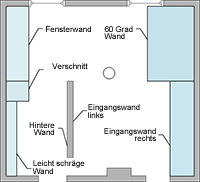
<style>
.page{position:relative;width:200px;height:182px;background:#ffffff}
.page>*{position:absolute;margin:0}
.t1{font:8px "ArialMT"}
.t2{font:8px/7.2px "ArialMT";color:#000000}
.t3{font:8px/7.2px "ArialMT"}
</style>
<div class="page">
<p class="t1" style="left:46px;top:26px;width:45px;height:6px">Fensterwand</p>
<p class="t2" style="left:104px;top:26px;width:29px;height:13px">60 Grad<br>Wand</p>
<p class="t1" style="left:52px;top:63px;width:36px;height:6px">Verschnitt</p>
<p class="t2" style="left:88px;top:104px;width:52px;height:14px">Eingangswand <br>links</p>
<p class="t3" style="left:29px;top:122px;width:26px;height:13px;text-align:right">Hintere<br>Wand</p>
<p class="t3" style="left:104px;top:128px;width:52px;height:13px;text-align:right">Eingangswand<br>rechts</p>
<p class="t3" style="left:32px;top:160px;width:53px;height:14px">Leicht schräge <br>Wand</p>
</div>
